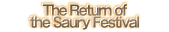
<style>
.page{position:relative;width:169px;height:32px;background:#ffffff}
.page>*{position:absolute;margin:0}
.t1{font:14px/12px "GothicMB101Pro-DeBold";letter-spacing:-0.08em;scale:0.9 1}
.t2{font:14px/12px "GothicMB101Pro-DeBold";letter-spacing:-0.08em;color:#816b53;scale:0.9 1}
</style>
<div class="page">
<p class="t1" style="left:29px;top:3px;width:109px;height:26px;text-align:center">The Return of<br>the Saury Festival</p>
<p class="t2" style="left:30px;top:4px;width:109px;height:26px;text-align:center">The Return of<br>the Saury Festival</p>
</div>
